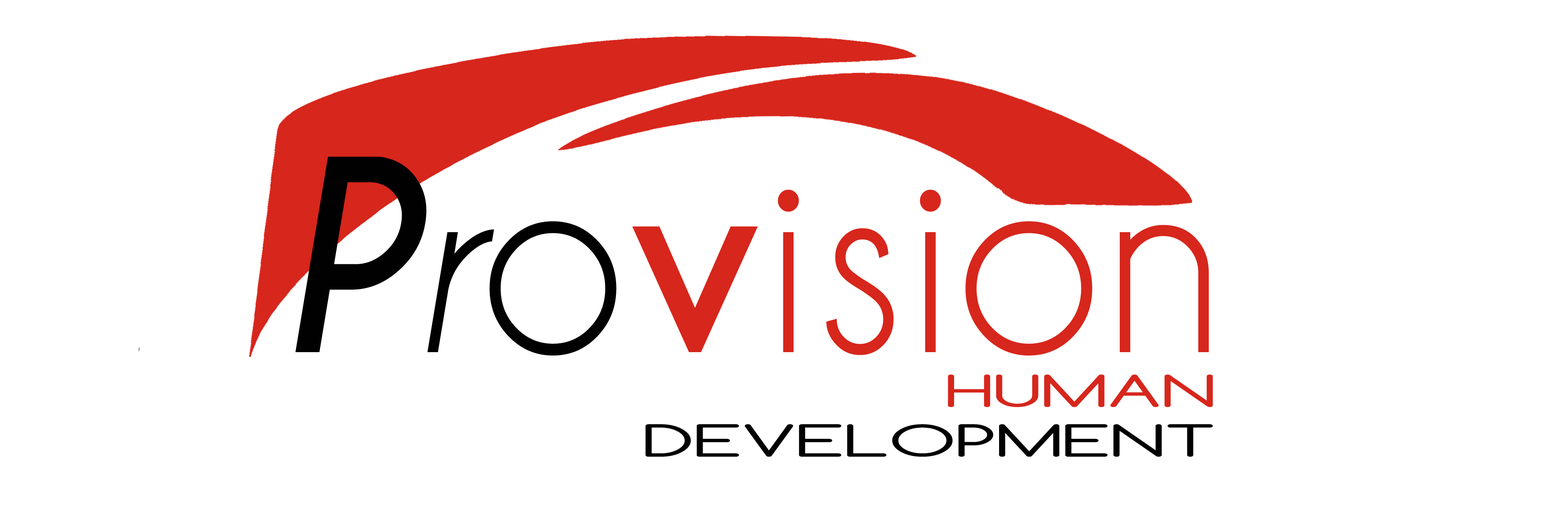
<style>
.page{position:relative;width:1568px;height:528px;background:#ffffff}
.page>*{position:absolute;margin:0}
.t1{font:249.7px "CaviarDreams";color:#d7261c;scale:0.95 1}
.t2{font:249.7px "CaviarDreams-BoldItalic";color:#020101;scale:0.95 1}
.t3{font:249.7px "CaviarDreams-Italic";color:#020101;scale:0.95 1}
.t4{font:249.7px "CaviarDreams";color:#020101;scale:0.95 1}
.t5{font:249.7px "CaviarDreams-Bold";color:#d7261c;scale:0.95 1}
.t6{font:41.4px "Comfortaa";color:#020101;scale:1.86 1}
.t7{font:41.4px "Comfortaa";color:#d7261c;scale:1.86 1}
</style>
<div class="page">
<p class="t1" style="left:295px;top:156px;width:914px;height:199px"><span class="t2">P</span><span class="t3">r</span><span class="t4">o</span><span class="t5">v</span>ision</p>
<p class="t6" style="left:645px;top:374px;width:568px;height:83px;text-align:right"><span class="t7">HUMAN<br></span>DEVELOPMENT</p>
</div>
